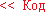
<style>
.page{position:relative;width:45px;height:12px;background:#ffffff}
.page>*{position:absolute;margin:0}
.t1{font:14px "TimesNewRomanPSMT";color:#e70e19}
</style>
<div class="page">
<p class="t1" style="left:0px;top:0px;width:45px;height:12px">&lt;&lt;  Код</p>
</div>
